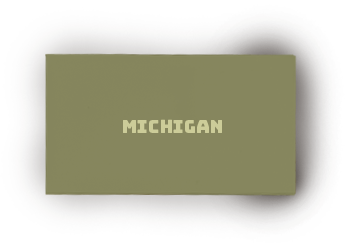
<style>
.page{position:relative;width:347px;height:243px;background:#86865e}
.page>*{position:absolute;margin:0}
.t1{font:18px "Bungee-Regular";color:#cccc99}
</style>
<div class="page">
<p class="t1" style="left:123px;top:119px;width:99px;height:14px">Michigan</p>
</div>
